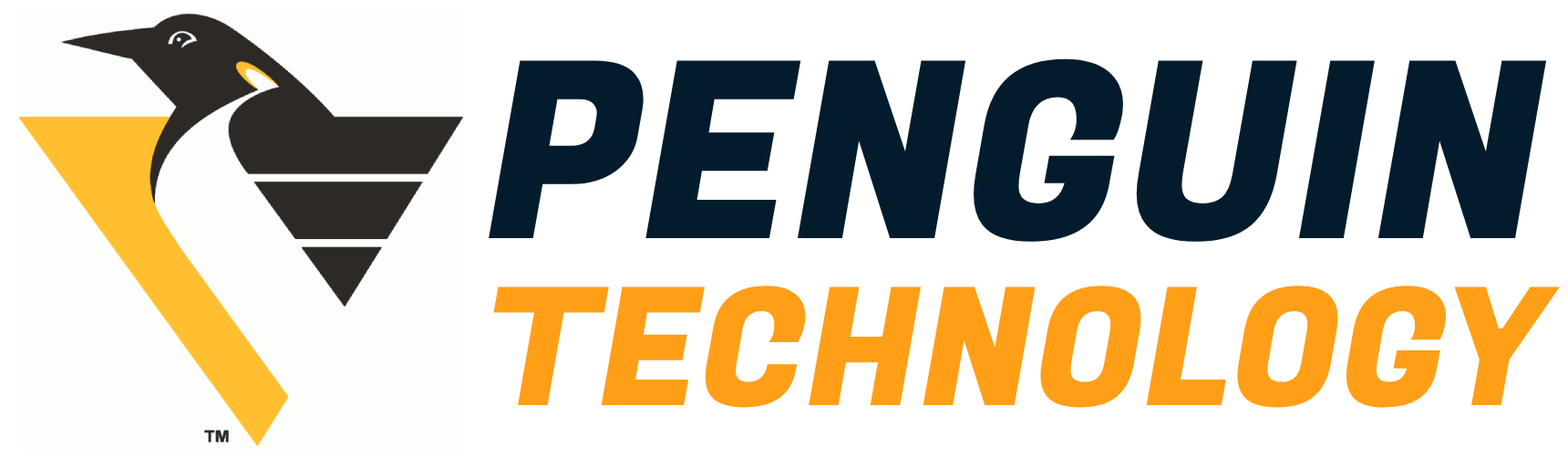
<style>
.page{position:relative;width:1568px;height:458px;background:#ffffff}
.page>*{position:absolute;margin:0}
.t1{font:246.1px "FugazOne-Regular";color:#021c2d;text-transform:uppercase}
.t2{font:164.1px "FugazOne-Regular";color:#ff9f17;text-transform:uppercase}
</style>
<div class="page">
<p class="t1" style="left:489px;top:58px;width:1058px;height:184px">Penguin</p>
<p class="t2" style="left:493px;top:285px;width:1067px;height:122px">Technology</p>
</div>
